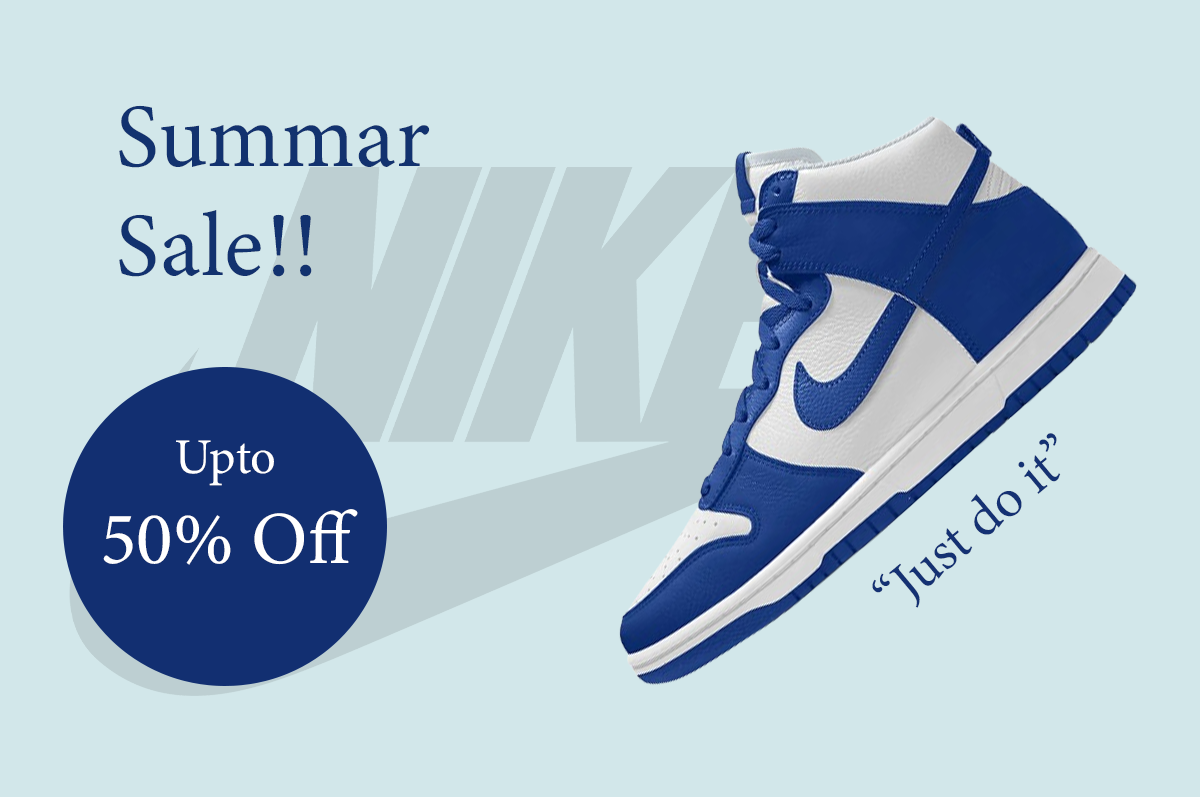
<style>
.page{position:relative;width:1200px;height:797px;background:#d2e7ea}
.page>*{position:absolute;margin:0}
.t1{font:90.6px "MinionVariableConcept-Roman";color:#12326f}
.t2{font:55px "MinionVariableConcept-Roman";color:#143173}
.t3{font:75px "MinionVariableConcept-Roman";color:#ffffff}
.t4{font:50px "MinionVariableConcept-Roman";color:#ffffff}
</style>
<div class="page">
<p class="t1" style="left:119px;top:105px;width:311px;height:172px">Summar  <br>Sale!!</p>
<p class="t2" style="left:872px;top:433px;width:189px;height:175px;rotate:-40deg">“Just do it”</p>
<p class="t3" style="left:103px;top:440px;width:255px;height:125px;text-align:center"><span class="t4">Upto <br></span>50% Off</p>
</div>
